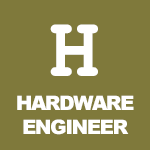
<style>
.page{position:relative;width:150px;height:150px;background:#7f793b}
.page>*{position:absolute;margin:0}
.t1{font:87px "CourierNewPS-BoldMT";letter-spacing:-0.075em;color:#ffffff}
.t2{font:20px "Arial-Black";letter-spacing:-0.075em;color:#ffffff}
</style>
<div class="page">
<p class="t1" style="left:50px;top:24px;width:48px;height:52px">H</p>
<p class="t2" style="left:17px;top:95px;width:117px;height:40px;text-align:center">HARDWARE<br>ENGINEER</p>
</div>
